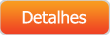
<style>
.page{position:relative;width:110px;height:35px}
.page>*{position:absolute;margin:0}
.t1{font:16.7px "Tahoma";color:#fdfbfb}
</style>
<div class="page">
<p class="t1" style="left:22px;top:10px;width:65px;height:14px">Detalhes</p>
</div>
